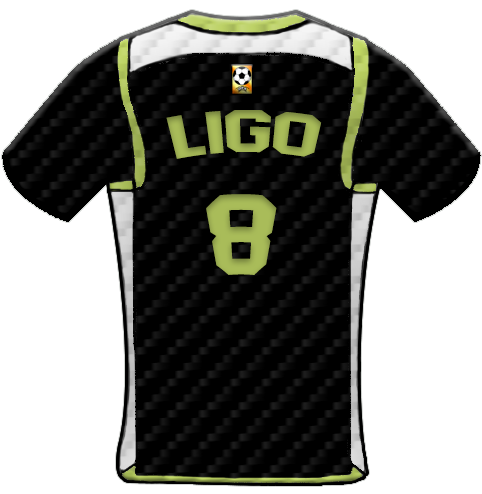
<style>
.page{position:relative;width:482px;height:494px;background:#ffffff}
.page>*{position:absolute;margin:0}
.t1{font:59.4px "AdidasHalfBlock2016";color:#a9bc59;scale:1.13 1}
.t2{font:113.8px "AdidasHalfBlock2016";color:#a9bc59}
</style>
<div class="page">
<p class="t1" style="left:166px;top:110px;width:156px;height:49px">Ligo</p>
<p class="t2" style="left:206px;top:194px;width:71px;height:81px">8</p>
</div>
